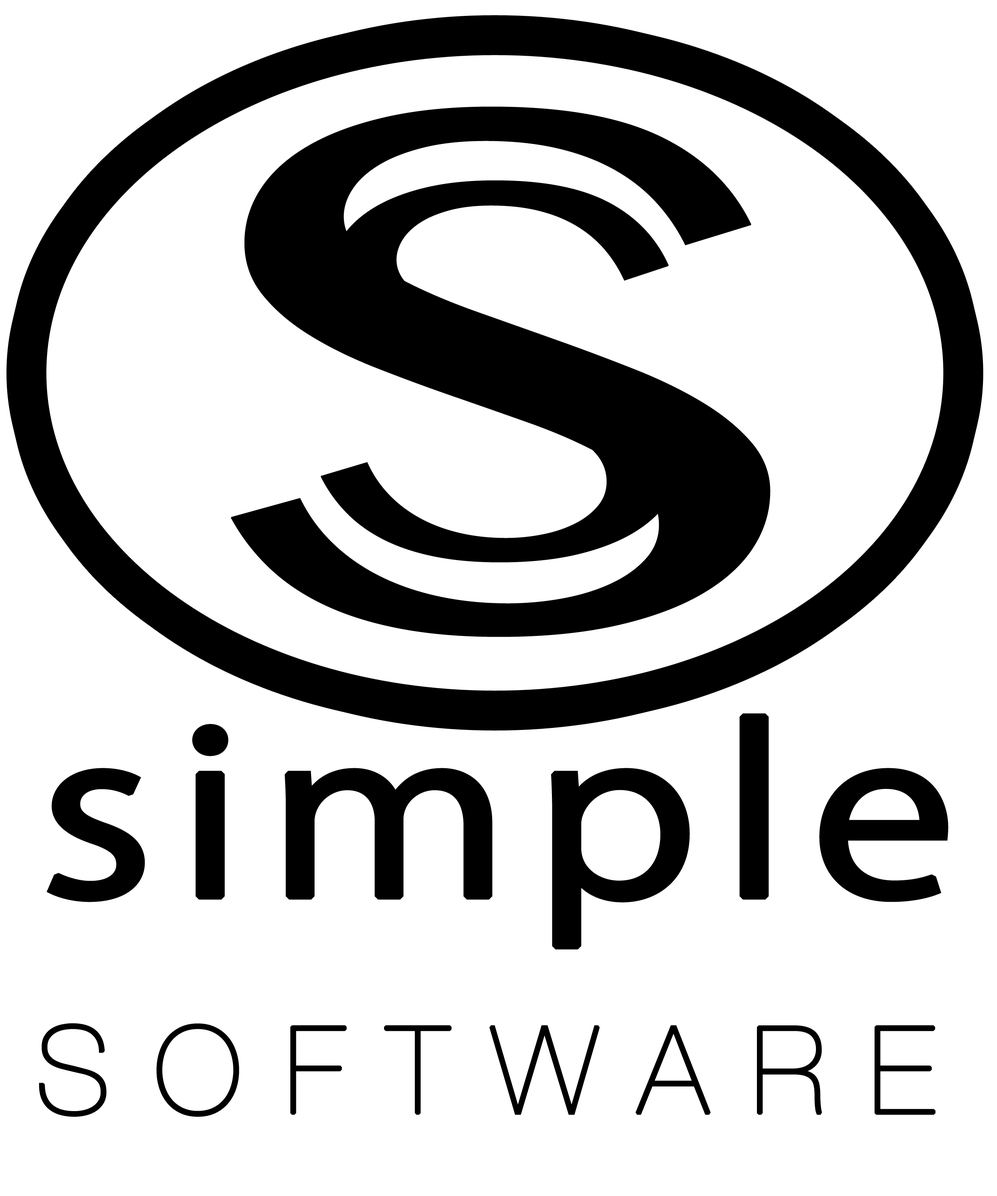
<style>
.page{position:relative;width:997px;height:1196px;background:#ffffff}
.page>*{position:absolute;margin:0}
.t1{font:743.3px "BanglaMN";color:#000000;font-weight:bold;scale:1.49 1}
.t2{font:534.9px "BanglaMN";color:#000000;font-weight:bold;scale:1.39 1}
.t3{font:224.1px "KozGoPro-Regular";letter-spacing:0.06em;color:#000000;font-weight:bold;scale:1.2 1}
.t4{font:120.4px "HelveticaNeue-UltraLight";letter-spacing:0.34em;color:#000000;font-weight:bold}
</style>
<div class="page">
<p class="t1" style="left:231px;top:106px;width:539px;height:531px">S</p>
<p class="t2" style="left:321px;top:180px;width:360px;height:383px">S</p>
<p class="t3" style="left:47px;top:713px;width:901px;height:237px">simple</p>
<p class="t4" style="left:39px;top:1023px;width:896px;height:94px">SOFTWARE</p>
</div>
